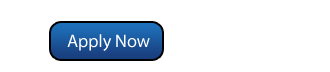
<style>
.page{position:relative;width:330px;height:72px;background:#ffffff}
.page>*{position:absolute;margin:0}
.t1{font:18px "MyriadPro-Regular";color:#ffffff}
</style>
<div class="page">
<p class="t1" style="left:67px;top:34px;width:83px;height:17px">Apply Now</p>
</div>
